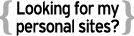
<style>
.page{position:relative;width:134px;height:36px;background:#ffffff}
.page>*{position:absolute;margin:0}
.t1{font:40px "BenguiatITCbyBT-Bold";letter-spacing:-0.04em;color:#aaaaaa}
.t2{font:18px/18px "Interstate-Regular";letter-spacing:-0.04em;color:#000000;scale:0.9 1}
</style>
<div class="page">
<p class="t1" style="left:0px;top:0px;width:12px;height:35px">{</p>
<p class="t2" style="left:16px;top:1px;width:103px;height:35px;text-align:center">Looking for my <br>personal sites?</p>
<p class="t1" style="left:122px;top:0px;width:14px;height:35px">}</p>
</div>
